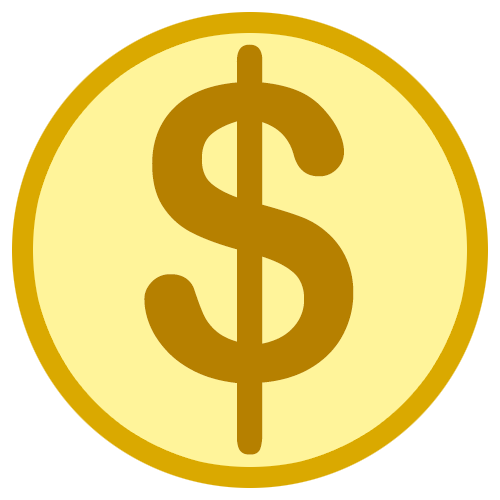
<style>
.page{position:relative;width:500px;height:500px;background:#fff49a}
.page>*{position:absolute;margin:0}
.t1{font:407.5px "ArialRoundedMTBold";color:#b68000}
</style>
<div class="page">
<p class="t1" style="left:144px;top:44px;width:210px;height:411px">$</p>
</div>
